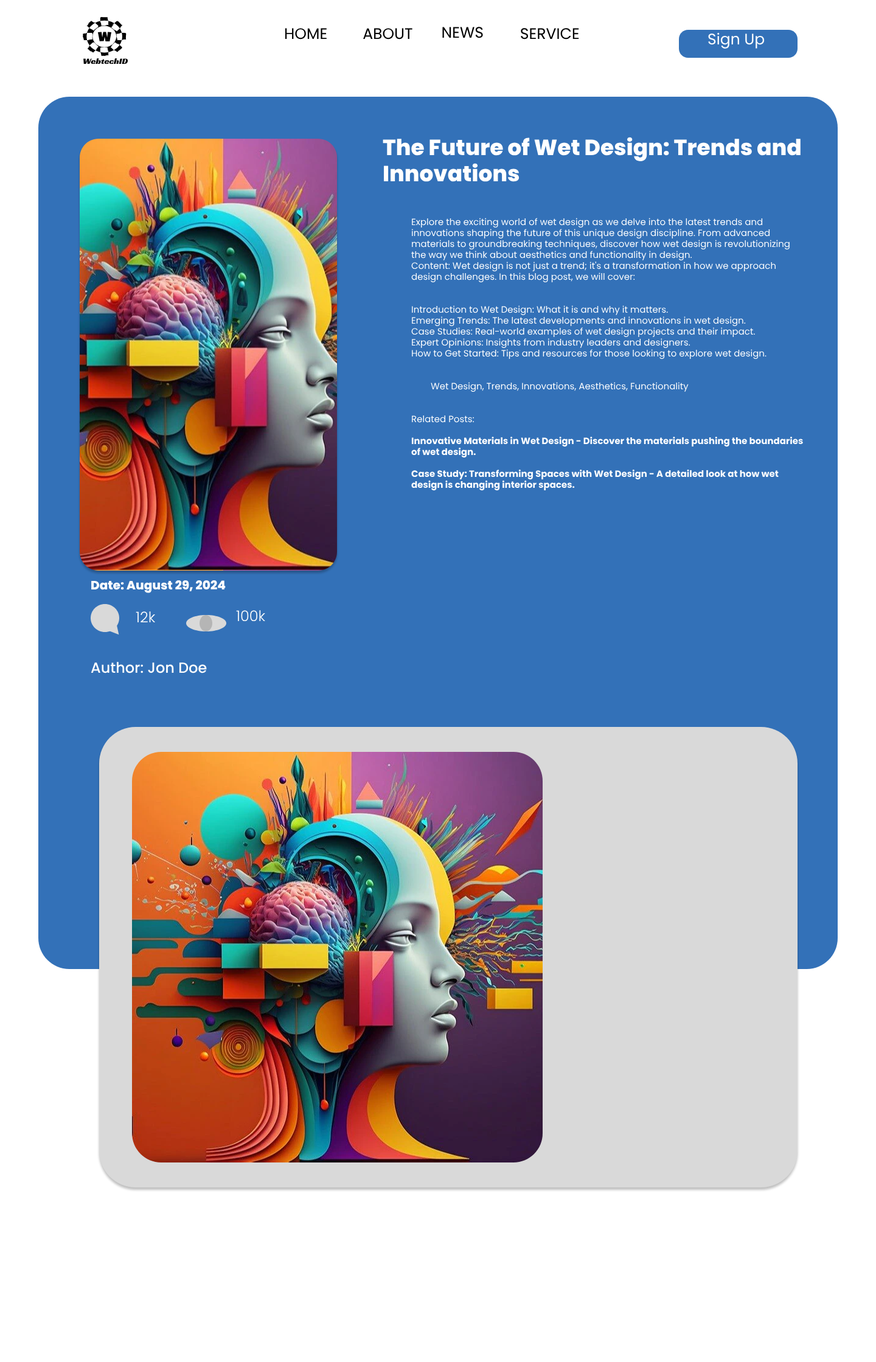
<style>
.page{position:relative;width:876px;height:1362px;background:#ffffff}
.page>*{position:absolute;margin:0}
.t1{font:15.2px "Poppins-Regular";color:#000000}
.t2{font:15.2px "Poppins-Regular";color:#ffffff}
.t3{font:21.9px "Poppins-ExtraBold";color:#ffffff}
.t4{font:9.1px "Poppins-Regular";color:#ffffff}
.t5{font:9.1px "Poppins-Bold";color:#ffffff}
.t6{font:12.2px "Poppins-ExtraBold";color:#ffffff}
.t7{font:14.6px "Poppins-Light";color:#ffffff}
.t8{font:14.6px "Poppins-Medium";color:#ffffff}
</style>
<div class="page">
<p class="t1" style="left:285px;top:28px;width:42px;height:12px">HOME</p>
<p class="t1" style="left:363px;top:28px;width:49px;height:12px">ABOUT</p>
<p class="t1" style="left:442px;top:27px;width:41px;height:11px">NEWS</p>
<p class="t1" style="left:521px;top:28px;width:58px;height:12px">SERVICE</p>
<p class="t2" style="left:708px;top:32px;width:56px;height:17px">Sign Up</p>
<p class="t3" style="left:383px;top:137px;width:417px;height:45px">The Future of Wet Design: Trends and Innovations</p>
<p class="t4" style="left:411px;top:218px;width:392px;height:273px">Explore the exciting world of wet design as we delve into the latest trends and innovations shaping the future of this unique design discipline. From advanced materials to groundbreaking techniques, discover how wet design is revolutionizing the way we think about aesthetics and functionality in design.<br>Content: Wet design is not just a trend; it's a transformation in how we approach design challenges. In this blog post, we will cover:<br><br><br>Introduction to Wet Design: What it is and why it matters.<br>Emerging Trends: The latest developments and innovations in wet design.<br>Case Studies: Real-world examples of wet design projects and their impact.<br>Expert Opinions: Insights from industry leaders and designers.<br>How to Get Started: Tips and resources for those looking to explore wet design.<br><br><br>        Wet Design, Trends, Innovations, Aesthetics, Functionality<br><br><br>Related Posts:<br><br><span class="t5">Innovative Materials in Wet Design - Discover the materials pushing the boundaries of wet design.<br><br>Case Study: Transforming Spaces with Wet Design - A detailed look at how wet design is changing interior spaces.</span></p>
<p class="t6" style="left:91px;top:580px;width:135px;height:13px">Date: August 29, 2024</p>
<p class="t7" style="left:136px;top:611px;width:20px;height:11px">12k</p>
<p class="t7" style="left:236px;top:610px;width:29px;height:12px">100k</p>
<p class="t8" style="left:91px;top:662px;width:116px;height:11px">Author: Jon Doe</p>
</div>
